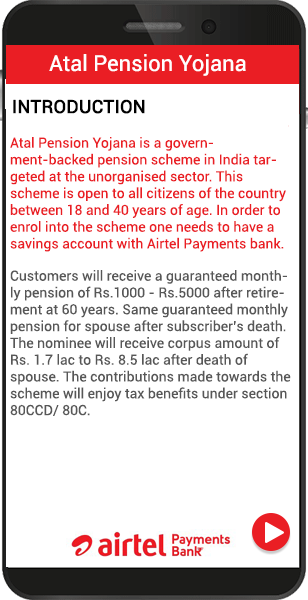
<style>
.page{position:relative;width:308px;height:600px;background:#ffffff}
.page>*{position:absolute;margin:0}
.t1{font:22px "Roboto-Regular";color:#fffefe}
.t2{font:18px "Roboto-Regular";color:#010101;font-weight:bold}
.t3{font:14px "Roboto-Regular";color:#ea1e24}
.t4{font:14px "Roboto-Regular";color:#575757}
</style>
<div class="page">
<p class="t1" style="left:49px;top:54px;width:197px;height:22px">Atal Pension Yojana</p>
<p class="t2" style="left:13px;top:99px;width:132px;height:15px">INTRODUCTION</p>
<p class="t3" style="left:10px;top:137px;width:276px;height:115px">Atal Pension Yojana is a government-backed pension scheme in India targeted at the unorganised sector. This scheme is open to all citizens of the country between 18 and 40 years of age. In order to enrol into the scheme one needs to have a savings account with Airtel Payments bank.</p>
<p class="t4" style="left:10px;top:270px;width:281px;height:146px">Customers will receive a guaranteed monthly pension of Rs.1000 - Rs.5000 after retirement at 60 years. Same guaranteed monthly pension for spouse after subscriber’s death. The nominee will receive corpus amount of Rs. 1.7 lac to Rs. 8.5 lac after death of spouse. The contributions made towards the scheme will enjoy tax benefits under section 80CCD/ 80C.</p>
</div>
